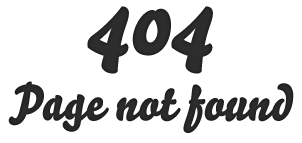
<style>
.page{position:relative;width:302px;height:143px;background:#ffffff}
.page>*{position:absolute;margin:0}
.t1{font:100px "Bello-Script";color:#2d2d2d}
.t2{font:50px "Bello-Script";color:#2d2d2d}
</style>
<div class="page">
<p class="t1" style="left:87px;top:6px;width:126px;height:68px">404</p>
<p class="t2" style="left:8px;top:81px;width:286px;height:52px">Page not found</p>
</div>
